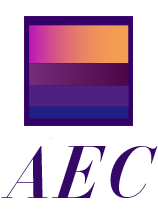
<style>
.page{position:relative;width:158px;height:215px;background:#ffffff}
.page>*{position:absolute;margin:0}
.t1{font:72px "KarloffPositiveStd-BldIta";letter-spacing:0.075em;color:#340866}
</style>
<div class="page">
<p class="t1" style="left:1px;top:146px;width:157px;height:52px">AEC</p>
</div>
